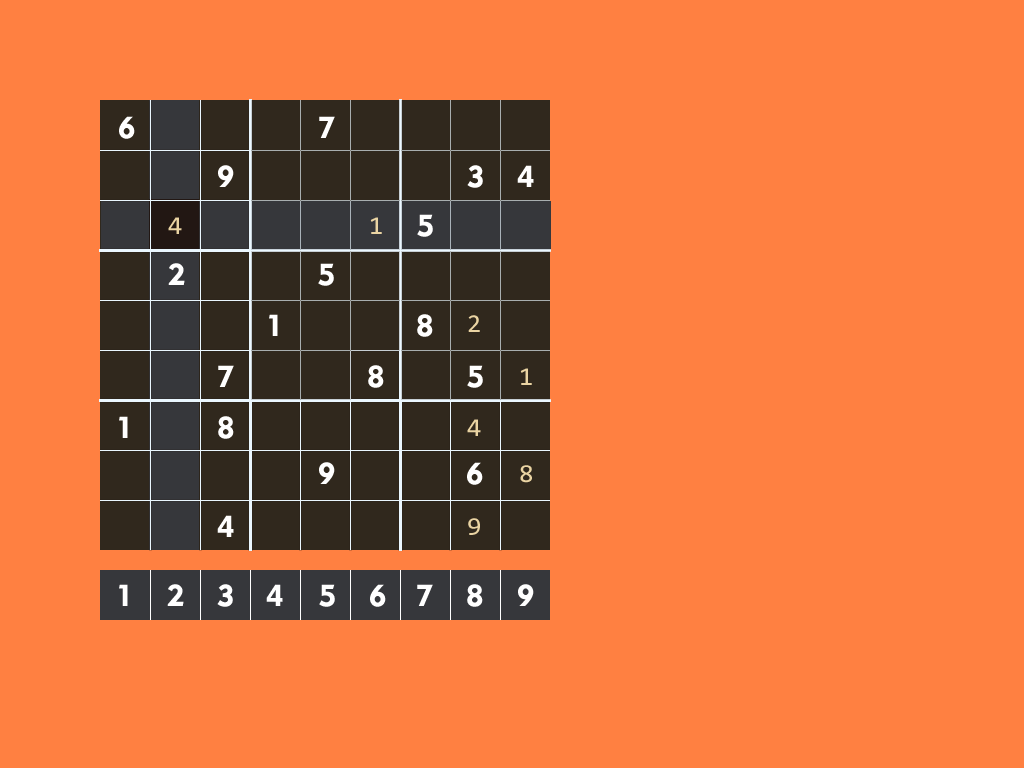
<style>
.page{position:relative;width:1024px;height:768px;background:#ff8041}
.page>*{position:absolute;margin:0}
.t1{font:30px "Geometric415BT-BlackA";letter-spacing:0.015em;color:#ffffff}
.t2{font:26px "Consolas";letter-spacing:0.015em;color:#ead4a3}
</style>
<div class="page">
<p class="t1" style="left:119px;top:116px;width:16px;height:23px">6</p>
<p class="t1" style="left:319px;top:116px;width:16px;height:22px">7</p>
<p class="t1" style="left:218px;top:165px;width:16px;height:22px">9</p>
<p class="t1" style="left:467px;top:165px;width:16px;height:23px">3</p>
<p class="t1" style="left:517px;top:165px;width:17px;height:22px">4</p>
<p class="t2" style="left:168px;top:217px;width:14px;height:17px">4</p>
<p class="t2" style="left:370px;top:217px;width:12px;height:17px">1</p>
<p class="t1" style="left:417px;top:214px;width:16px;height:23px">5</p>
<p class="t1" style="left:168px;top:263px;width:17px;height:22px">2</p>
<p class="t1" style="left:318px;top:263px;width:16px;height:23px">5</p>
<p class="t1" style="left:269px;top:314px;width:9px;height:22px">1</p>
<p class="t1" style="left:417px;top:314px;width:16px;height:23px">8</p>
<p class="t2" style="left:468px;top:315px;width:12px;height:17px">2</p>
<p class="t1" style="left:218px;top:365px;width:16px;height:22px">7</p>
<p class="t1" style="left:368px;top:365px;width:16px;height:23px">8</p>
<p class="t1" style="left:467px;top:365px;width:16px;height:23px">5</p>
<p class="t2" style="left:520px;top:368px;width:12px;height:17px">1</p>
<p class="t1" style="left:119px;top:416px;width:9px;height:22px">1</p>
<p class="t1" style="left:218px;top:416px;width:16px;height:23px">8</p>
<p class="t2" style="left:467px;top:419px;width:14px;height:17px">4</p>
<p class="t1" style="left:319px;top:462px;width:16px;height:22px">9</p>
<p class="t1" style="left:467px;top:462px;width:16px;height:23px">6</p>
<p class="t2" style="left:520px;top:465px;width:12px;height:18px">8</p>
<p class="t1" style="left:217px;top:515px;width:17px;height:22px">4</p>
<p class="t2" style="left:468px;top:518px;width:12px;height:17px">9</p>
<p class="t1" style="left:119px;top:584px;width:9px;height:22px">1</p>
<p class="t1" style="left:167px;top:584px;width:17px;height:22px">2</p>
<p class="t1" style="left:217px;top:584px;width:16px;height:23px">3</p>
<p class="t1" style="left:266px;top:584px;width:17px;height:22px">4</p>
<p class="t1" style="left:319px;top:584px;width:16px;height:23px">5</p>
<p class="t1" style="left:370px;top:584px;width:16px;height:23px">6</p>
<p class="t1" style="left:417px;top:584px;width:16px;height:22px">7</p>
<p class="t1" style="left:467px;top:584px;width:16px;height:23px">8</p>
<p class="t1" style="left:518px;top:584px;width:16px;height:22px">9</p>
</div>
